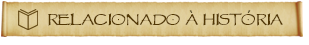
<style>
.page{position:relative;width:309px;height:45px;background:#ffffff}
.page>*{position:absolute;margin:0}
.t1{font:16px "VTCGoblinHandSC";letter-spacing:-0.02em;color:#523703;text-transform:uppercase;scale:1.05 1}
.t2{font:16px "Papyrus";letter-spacing:-0.02em;text-transform:uppercase;scale:1.05 1}
</style>
<div class="page">
<p class="t1" style="left:48px;top:13px;width:235px;height:13px">Relacionado a Historia</p>
<p class="t2" style="left:189px;top:10px;width:4px;height:3px;rotate:180deg">´</p>
<p class="t2" style="left:247px;top:10px;width:4px;height:3px">´</p>
</div>
